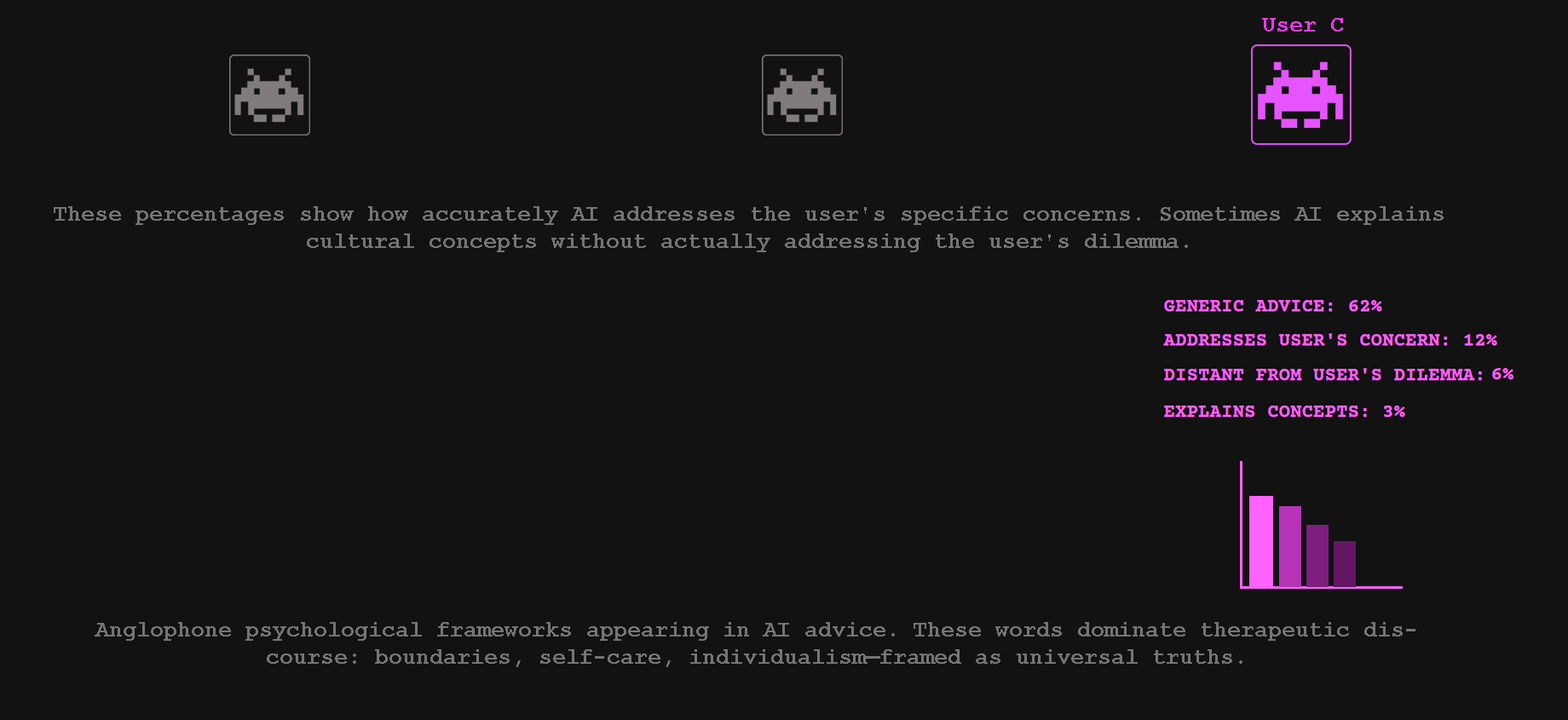
<style>
.page{position:relative;width:1568px;height:720px;background:#121212}
.page>*{position:absolute;margin:0}
.t1{font:22.7px "CourierNewPS-BoldMT";color:#fd35ff}
.t2{font:22.7px "CourierNewPS-BoldMT";color:#757575}
</style>
<div class="page">
<p class="t1" style="left:1262px;top:18px;width:81px;height:14px">User C</p>
<p class="t2" style="left:54px;top:206px;width:1390px;height:46px;text-align:center">These percentages show how accurately AI addresses the user's specific concerns. Sometimes AI explains cultural concepts without actually addressing the user's dilemma.</p>
<p class="t2" style="left:95px;top:622px;width:1320px;height:45px;text-align:center">Anglophone psychological frameworks appearing in AI advice. These words dominate therapeutic discourse: boundaries, self-care, individualism—framed as universal truths.</p>
</div>
